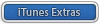
<style>
.page{position:relative;width:100px;height:24px}
.page>*{position:absolute;margin:0}
.t1{font:11px "MyriadPro-Regular";letter-spacing:0.02em;color:#b1c2d8}
</style>
<div class="page">
<p class="t1" style="left:18px;top:8px;width:62px;height:8px">iTunes Extras</p>
</div>
